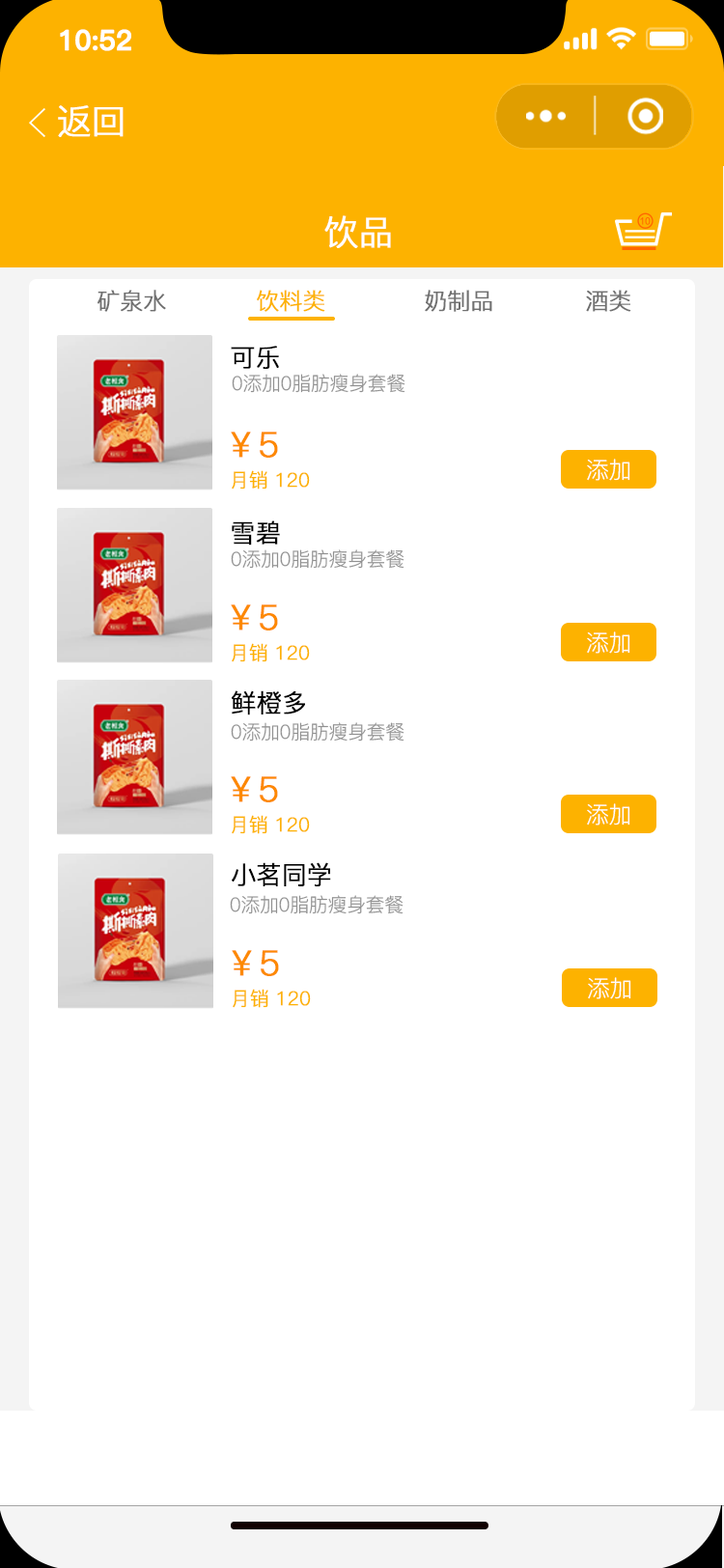
<style>
.page{position:relative;width:724px;height:1568px;background:#ffffff}
.page>*{position:absolute;margin:0}
.t1{font:27.5px "PingFang-SC-Bold";letter-spacing:-0.02em;color:#ffffff;font-weight:bold}
.t2{font:34.8px "PingFang-SC-Regular";letter-spacing:-0.02em;color:#ffffff;font-weight:bold}
.t3{font:23.2px "PingFang-SC-Regular";letter-spacing:-0.02em;color:#707070;font-weight:bold}
.t4{font:23.2px "PingFang-SC-Regular";letter-spacing:-0.02em;color:#fdb200;font-weight:bold}
.t5{font:25.1px "PingFang-SC-Regular";letter-spacing:-0.02em;color:#000000;font-weight:bold}
.t6{font:19.3px "PingFang-SC-Regular";letter-spacing:-0.02em;color:#919191}
.t7{font:34.8px "PingFang-SC-Regular";letter-spacing:-0.02em;color:#fd8900;font-weight:bold}
.t8{font:23.2px "PingFang-SC-Regular";letter-spacing:-0.02em;color:#ffffff}
.t9{font:19.3px "PingFang-SC-Regular";letter-spacing:-0.02em;color:#fdb200;font-weight:bold}
</style>
<div class="page">
<p class="t1" style="left:60px;top:29px;width:71px;height:22px">10:52</p>
<p class="t2" style="left:58px;top:105px;width:66px;height:32px">返回</p>
<p class="t2" style="left:324px;top:215px;width:67px;height:33px">饮品</p>
<p class="t3" style="left:98px;top:290px;width:68px;height:22px">矿泉水</p>
<p class="t4" style="left:257px;top:290px;width:68px;height:22px">饮料类</p>
<p class="t3" style="left:425px;top:290px;width:67px;height:22px">奶制品</p>
<p class="t3" style="left:586px;top:290px;width:45px;height:22px">酒类</p>
<p class="t5" style="left:231px;top:346px;width:48px;height:23px">可乐</p>
<p class="t6" style="left:232px;top:374px;width:174px;height:19px">0添加0脂肪瘦身套餐</p>
<p class="t7" style="left:231px;top:432px;width:47px;height:26px">￥5</p>
<p class="t8" style="left:587px;top:459px;width:43px;height:22px">添加</p>
<p class="t9" style="left:232px;top:470px;width:78px;height:20px">月销 120</p>
<p class="t5" style="left:232px;top:520px;width:48px;height:26px">雪碧</p>
<p class="t6" style="left:231px;top:549px;width:174px;height:20px">0添加0脂肪瘦身套餐</p>
<p class="t7" style="left:231px;top:604px;width:47px;height:26px">￥5</p>
<p class="t8" style="left:587px;top:631px;width:43px;height:23px">添加</p>
<p class="t9" style="left:232px;top:643px;width:78px;height:19px">月销 120</p>
<p class="t5" style="left:232px;top:690px;width:73px;height:25px">鲜橙多</p>
<p class="t6" style="left:231px;top:722px;width:174px;height:20px">0添加0脂肪瘦身套餐</p>
<p class="t7" style="left:231px;top:776px;width:47px;height:26px">￥5</p>
<p class="t8" style="left:587px;top:803px;width:43px;height:23px">添加</p>
<p class="t9" style="left:232px;top:815px;width:78px;height:19px">月销 120</p>
<p class="t5" style="left:232px;top:862px;width:99px;height:24px">小茗同学</p>
<p class="t6" style="left:230px;top:895px;width:174px;height:19px">0添加0脂肪瘦身套餐</p>
<p class="t7" style="left:232px;top:950px;width:47px;height:26px">￥5</p>
<p class="t8" style="left:588px;top:977px;width:43px;height:22px">添加</p>
<p class="t9" style="left:233px;top:989px;width:78px;height:19px">月销 120</p>
</div>
